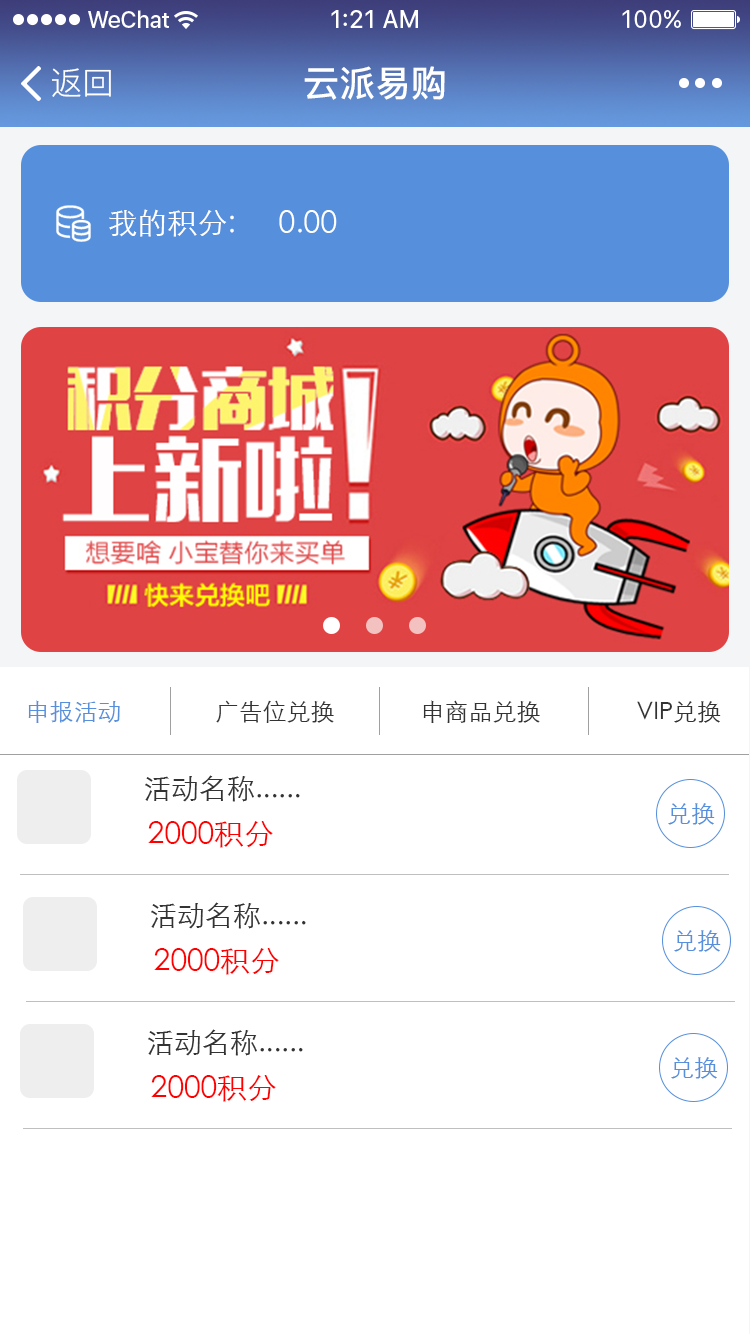
<style>
.page{position:relative;width:750px;height:1334px;background:#ffffff}
.page>*{position:absolute;margin:0}
.t1{font:32px "PingFang-SC-Regular";color:#ffffff}
.t2{font:36px "PingFang-SC-Bold";color:#ffffff}
.t3{font:30px "STXihei";color:#ffffff}
.t4{font:24px "STXihei";color:#568fdc}
.t5{font:24px "STXihei";color:#333333}
.t6{font:28px "STXihei";color:#333333}
.t7{font:30px "STXihei";color:#ff0000}
</style>
<div class="page">
<p class="t1" style="left:52px;top:68px;width:59px;height:29px">返回</p>
<p class="t2" style="left:304px;top:66px;width:141px;height:34px">云派易购</p>
<p class="t3" style="left:109px;top:209px;width:125px;height:28px">我的积分:</p>
<p class="t3" style="left:279px;top:210px;width:58px;height:23px">0.00</p>
<p class="t4" style="left:28px;top:700px;width:92px;height:23px">申报活动</p>
<p class="t5" style="left:216px;top:700px;width:118px;height:23px">广告位兑换</p>
<p class="t5" style="left:423px;top:700px;width:117px;height:23px">申商品兑换</p>
<p class="t5" style="left:637px;top:701px;width:84px;height:22px">VIP兑换</p>
<p class="t6" style="left:145px;top:775px;width:155px;height:27px">活动名称......</p>
<p class="t4" style="left:668px;top:803px;width:47px;height:22px">兑换</p>
<p class="t7" style="left:148px;top:821px;width:125px;height:27px">2000积分</p>
<p class="t6" style="left:151px;top:902px;width:155px;height:27px">活动名称......</p>
<p class="t4" style="left:674px;top:930px;width:47px;height:22px">兑换</p>
<p class="t7" style="left:154px;top:948px;width:125px;height:27px">2000积分</p>
<p class="t6" style="left:148px;top:1029px;width:155px;height:27px">活动名称......</p>
<p class="t4" style="left:671px;top:1057px;width:47px;height:22px">兑换</p>
<p class="t7" style="left:151px;top:1075px;width:125px;height:27px">2000积分</p>
</div>
